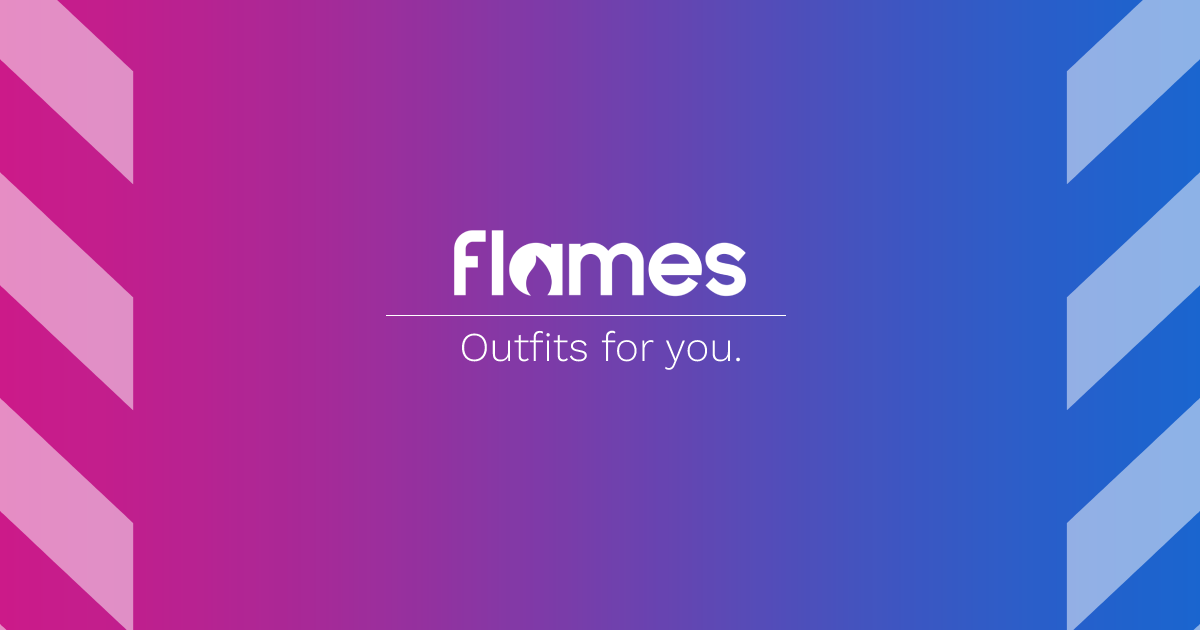
<style>
.page{position:relative;width:1200px;height:630px}
.page>*{position:absolute;margin:0}
.t1{font:41px "WorkSans-Light";color:#ffffff}
</style>
<div class="page">
<p class="t1" style="left:461px;top:330px;width:279px;height:40px">Outfits for you.</p>
</div>
